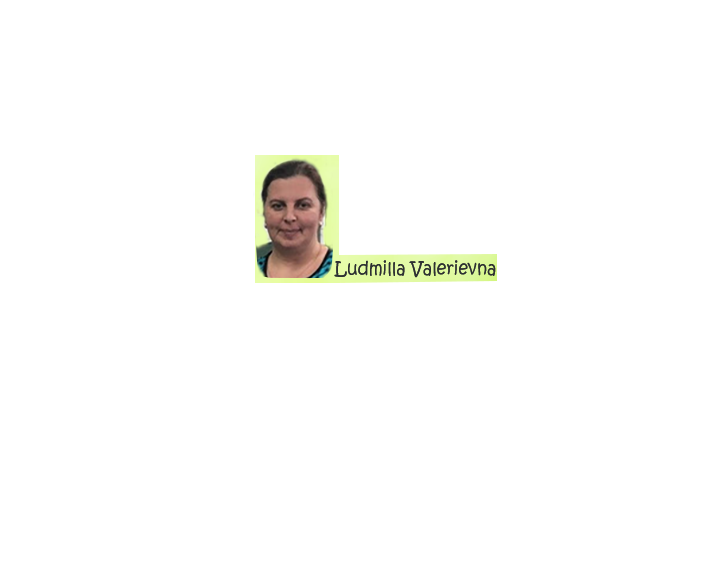
<style>
.page{position:relative;width:720px;height:576px;background:#ffffff}
.page>*{position:absolute;margin:0}
.t1{font:18px "KristenITC-Regular";color:#2d3033;scale:0.94 1}
</style>
<div class="page">
<p class="t1" style="left:334px;top:260px;width:162px;height:18px">Ludmilla Valerievna</p>
<p class="t1" style="left:334px;top:260px;width:162px;height:18px">Ludmilla Valerievna</p>
</div>
